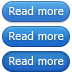
<style>
.page{position:relative;width:72px;height:75px;background:#ffffff}
.page>*{position:absolute;margin:0}
.t1{font:11px "Tahoma";letter-spacing:0.03em;color:#ffffff}
</style>
<div class="page">
<p class="t1" style="left:9px;top:6px;width:55px;height:9px">Read more</p>
<p class="t1" style="left:9px;top:31px;width:55px;height:9px">Read more</p>
<p class="t1" style="left:9px;top:56px;width:55px;height:9px">Read more</p>
</div>
